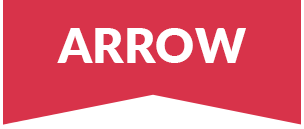
<style>
.page{position:relative;width:304px;height:129px;background:#d8334a}
.page>*{position:absolute;margin:0}
.t1{font:48px "Lato-Black";color:#ffffff}
</style>
<div class="page">
<p class="t1" style="left:57px;top:28px;width:189px;height:35px">ARROW</p>
</div>
